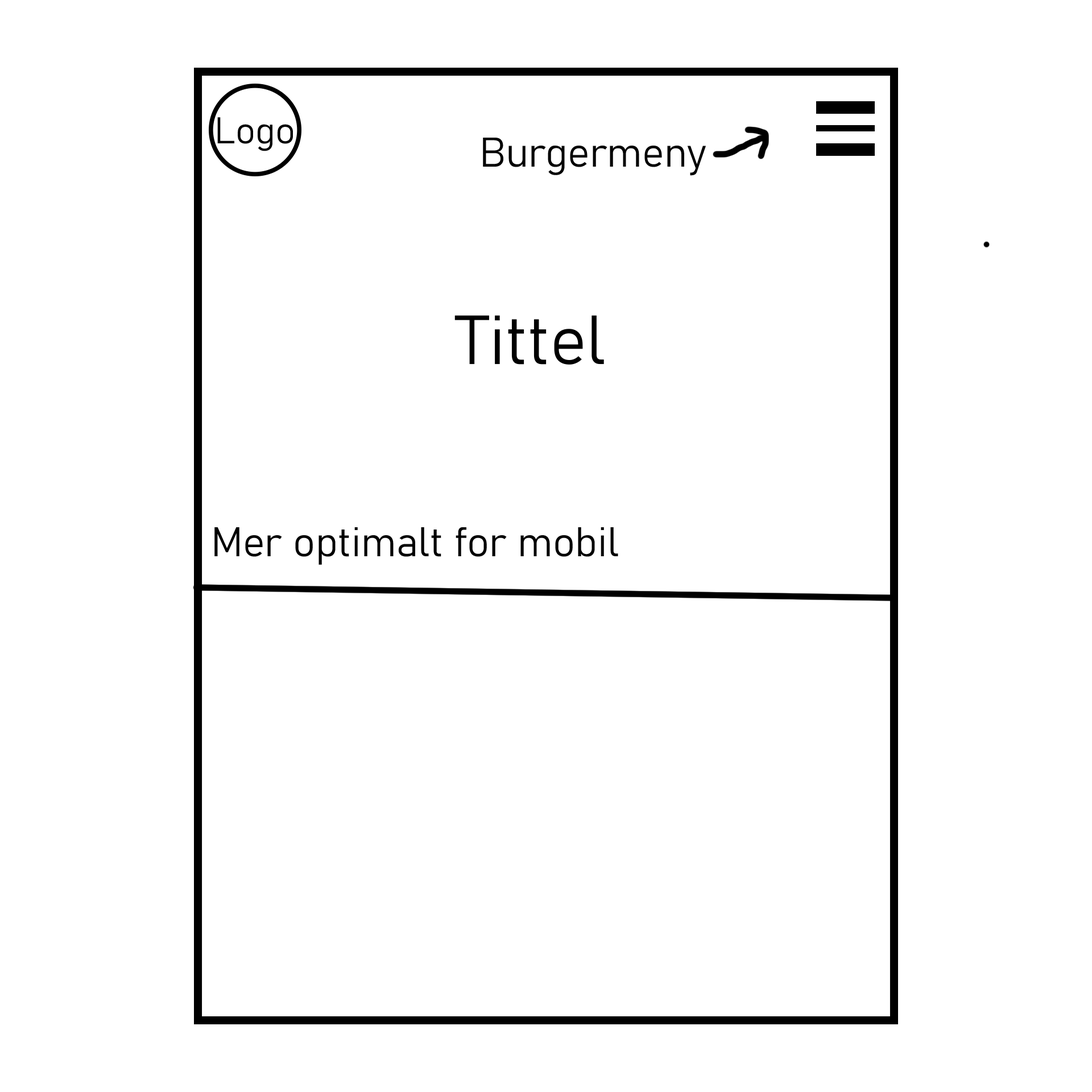
<style>
.page{position:relative;width:1092px;height:1092px;background:#ffffff}
.page>*{position:absolute;margin:0}
.t1{font:36.7px "Bahnschrift-Light";color:#000000}
.t2{font:40.9px "Bahnschrift-Light";color:#000000}
.t3{font:68.2px "Bahnschrift-Light";color:#000000}
</style>
<div class="page">
<p class="t1" style="left:217px;top:117px;width:76px;height:34px">Logo</p>
<p class="t2" style="left:483px;top:138px;width:223px;height:38px">Burgermeny</p>
<p class="t3" style="left:454px;top:315px;width:150px;height:50px">Tittel</p>
<p class="t2" style="left:214px;top:527px;width:404px;height:38px">Mer optimalt for mobil</p>
</div>
